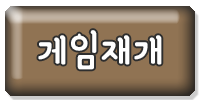
<style>
.page{position:relative;width:200px;height:100px;background:#907353}
.page>*{position:absolute;margin:0}
.t1{font:50px "YanoljaYacheR";color:#ffffff}
</style>
<div class="page">
<p class="t1" style="left:38px;top:30px;width:124px;height:40px">게임재개</p>
</div>
